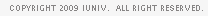
<style>
.page{position:relative;width:208px;height:16px;background:#f6f6f6}
.page>*{position:absolute;margin:0}
.t1{font:8px "LucidaSans";color:#868484}
</style>
<div class="page">
<p class="t1" style="left:10px;top:5px;width:193px;height:6px">COPYRIGHT 2009 IUNIV.  ALL RIGHT RESERVED.</p>
</div>
